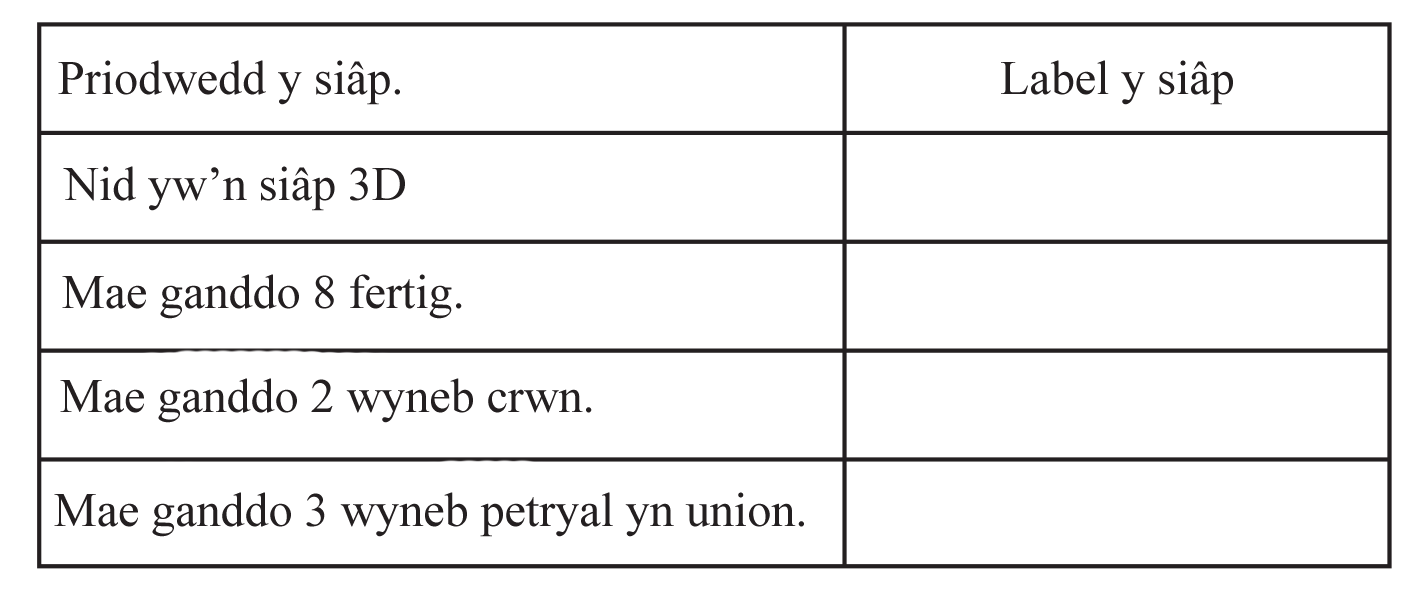
<style>
.page{position:relative;width:1420px;height:596px;background:#ffffff}
.page>*{position:absolute;margin:0}
.t1{font:48px "TimesNewRomanPSMT";color:#231f20}
</style>
<div class="page">
<p class="t1" style="left:58px;top:60px;width:342px;height:45px">Priodwedd y siâp.</p>
<p class="t1" style="left:1001px;top:60px;width:232px;height:45px">Label y siâp</p>
<p class="t1" style="left:63px;top:166px;width:342px;height:45px">Nid yw’n siâp 3D</p>
<p class="t1" style="left:62px;top:274px;width:400px;height:45px">Mae ganddo 8 fertig.</p>
<p class="t1" style="left:60px;top:378px;width:532px;height:45px">Mae ganddo 2 wyneb crwn.</p>
<p class="t1" style="left:54px;top:492px;width:750px;height:45px">Mae ganddo 3 wyneb petryal yn union.</p>
</div>
